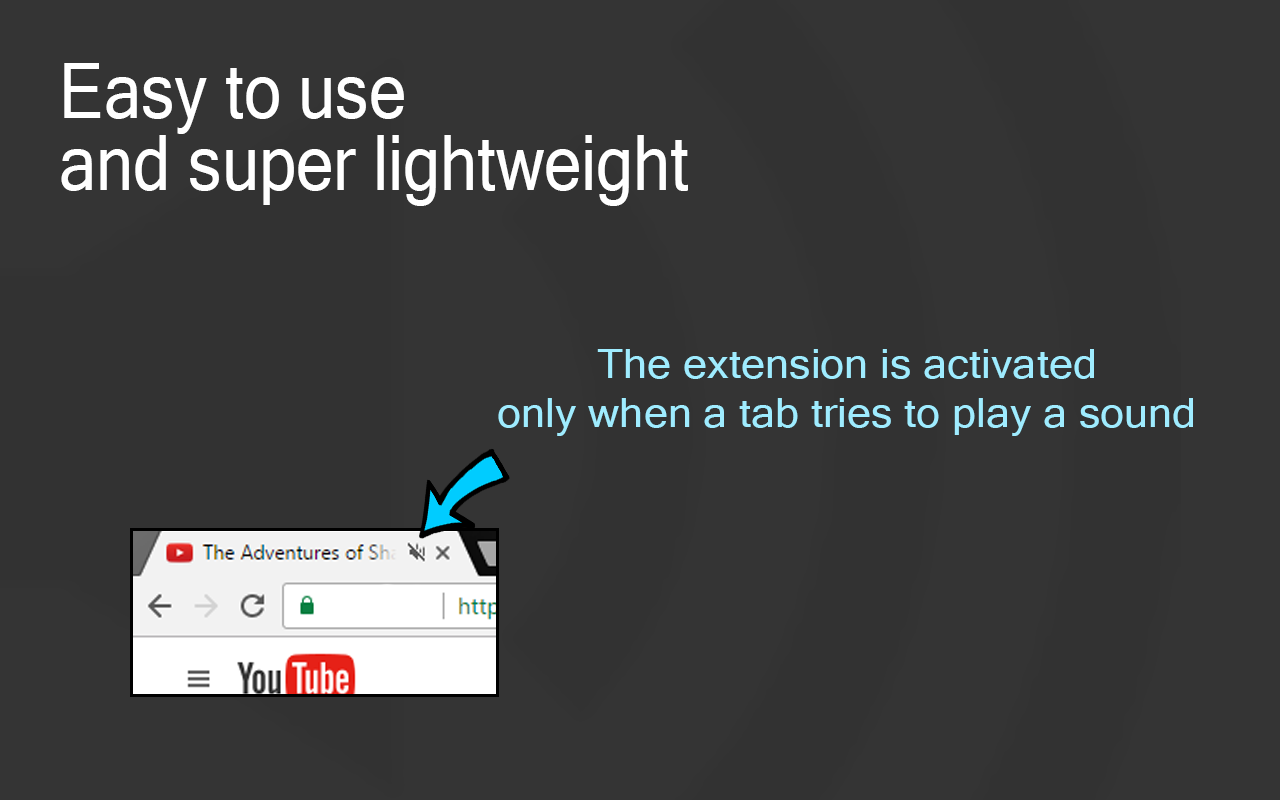
<style>
.page{position:relative;width:1280px;height:800px;background:#343434}
.page>*{position:absolute;margin:0}
.t1{font:76.8px/72px "MicrosoftSansSerif";color:#ffffff;scale:0.87 1}
.t2{font:41px "MicrosoftSansSerif";color:#9fecff;scale:1.06 1}
</style>
<div class="page">
<p class="t1" style="left:61px;top:63px;width:627px;height:143px">Easy to use<br>and super lightweight</p>
<p class="t2" style="left:498px;top:349px;width:695px;height:87px;text-align:center">The extension is activated<br>only when a tab tries to play a sound</p>
</div>
